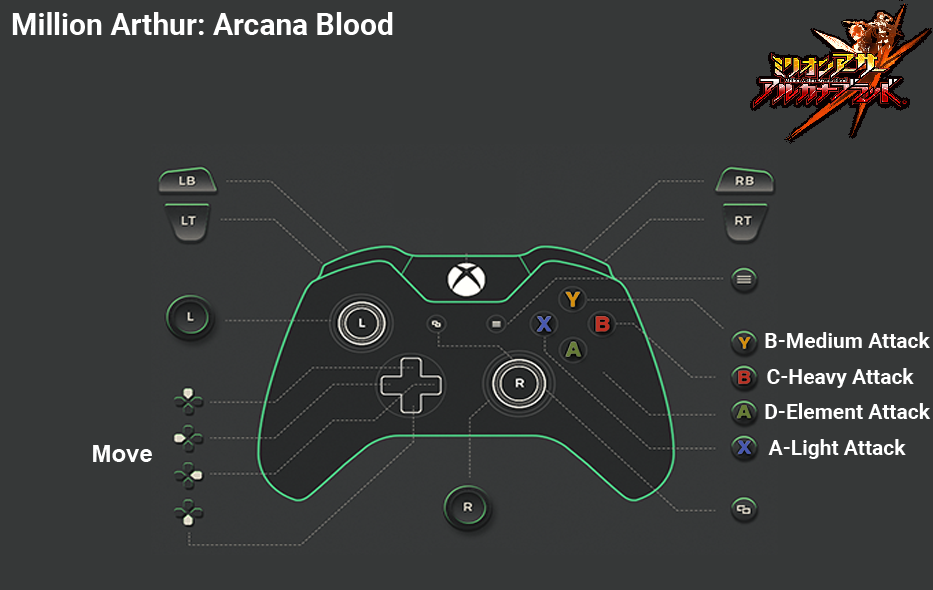
<style>
.page{position:relative;width:933px;height:590px;background:#363838}
.page>*{position:absolute;margin:0}
.t1{font:30px "Roboto-Bold";color:#ffffff}
.t2{font:21px "Roboto-Bold";color:#ffffff}
.t3{font:24px "Arial-BoldMT";color:#fefefe}
</style>
<div class="page">
<p class="t1" style="left:12px;top:12px;width:381px;height:23px">Million Arthur: Arcana Blood</p>
<p class="t2" style="left:765px;top:332px;width:165px;height:16px">B-Medium Attack</p>
<p class="t2" style="left:767px;top:368px;width:147px;height:20px">C-Heavy Attack</p>
<p class="t2" style="left:765px;top:403px;width:166px;height:16px">D-Element Attack</p>
<p class="t3" style="left:93px;top:445px;width:59px;height:17px">Move</p>
<p class="t2" style="left:768px;top:439px;width:138px;height:20px">A-Light Attack</p>
</div>
